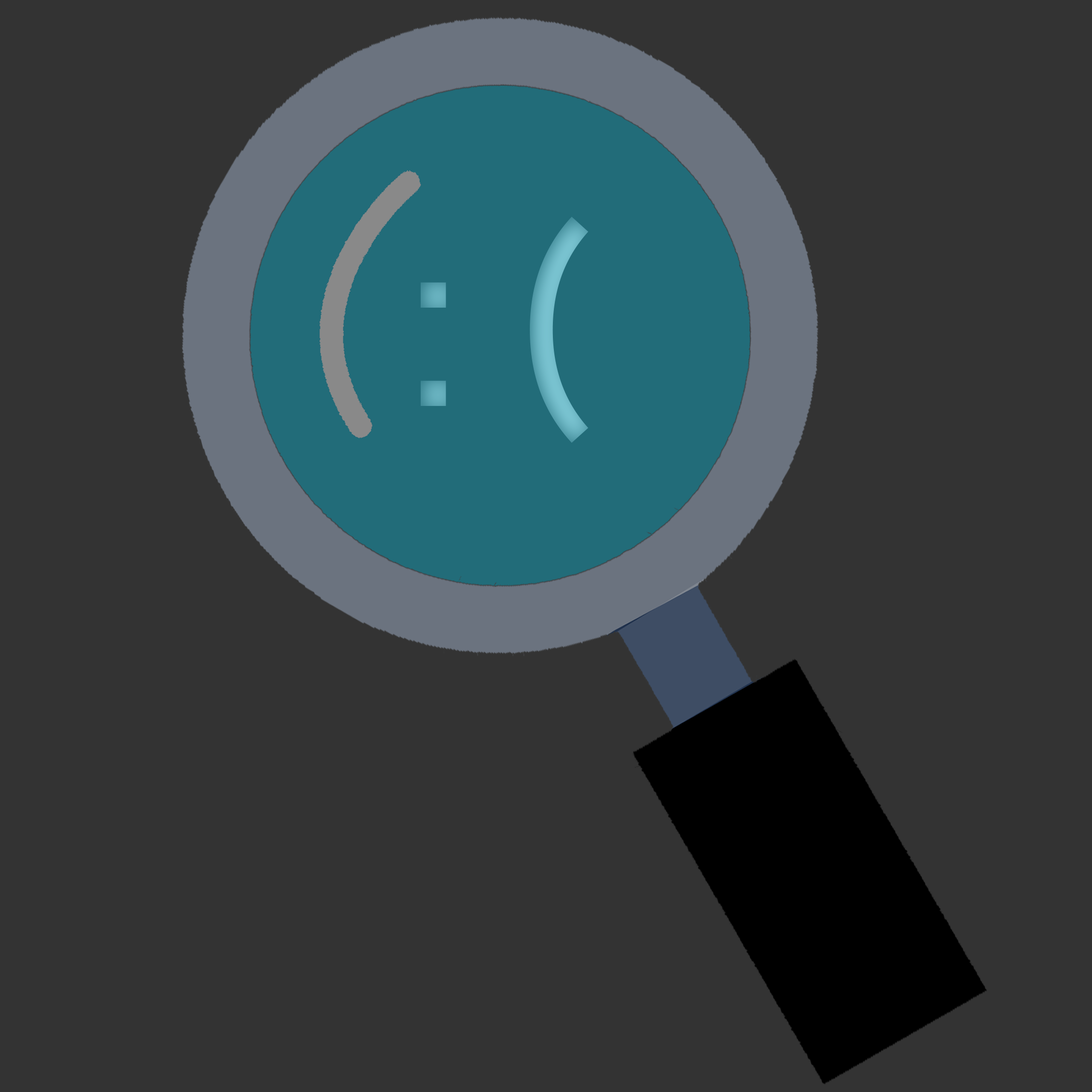
<style>
.page{position:relative;width:1092px;height:1092px;background:#333333}
.page>*{position:absolute;margin:0}
.t1{font:241px "Bahnschrift";letter-spacing:0.2em;color:#69b2bf}
</style>
<div class="page">
<p class="t1" style="left:420px;top:217px;width:168px;height:226px">:(</p>
</div>
